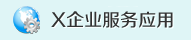
<style>
.page{position:relative;width:191px;height:40px;background:#dff5f6}
.page>*{position:absolute;margin:0}
.t1{font:18px "FZZZHUNHJW--GB1-0";color:#333333}
</style>
<div class="page">
<p class="t1" style="left:51px;top:11px;width:122px;height:17px">X企业服务应用</p>
</div>
